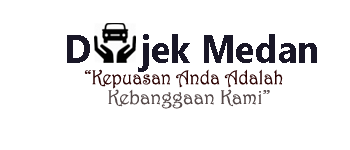
<style>
.page{position:relative;width:350px;height:150px;background:#ffffff}
.page>*{position:absolute;margin:0}
.t1{font:39.1px "SegoeUI-Bold";color:#191727;scale:0.93 1}
.t2{font:20px "Harrington";color:#2c0202;scale:0.93 1}
.t3{font:20px "Harrington";color:#544848}
</style>
<div class="page">
<p class="t1" style="left:67px;top:34px;width:250px;height:38px">D     jek Medan</p>
<p class="t2" style="left:84px;top:69px;width:199px;height:20px">“Kepuasan Anda Adalah</p>
<p class="t3" style="left:108px;top:89px;width:162px;height:20px">Kebanggaan Kami”</p>
</div>
